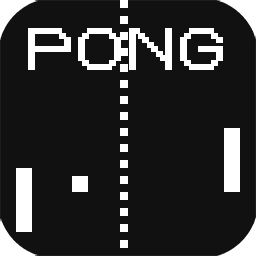
<style>
.page{position:relative;width:256px;height:256px;background:#111111}
.page>*{position:absolute;margin:0}
.t1{font:72px "Bit9x9";letter-spacing:-0.011em;color:#ffffff;font-weight:bold}
</style>
<div class="page">
<p class="t1" style="left:28px;top:28px;width:195px;height:42px">pong</p>
</div>
